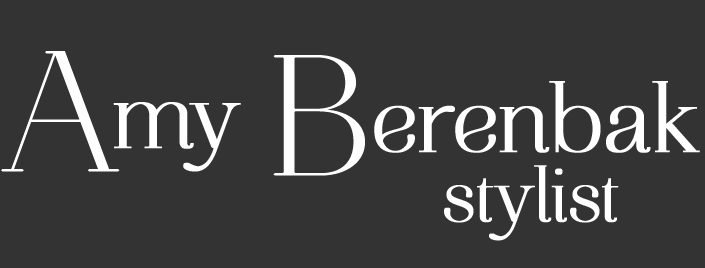
<style>
.page{position:relative;width:705px;height:268px;background:#333333}
.page>*{position:absolute;margin:0}
.t1{font:96.7px "AireBoldStd";color:#ffffff;font-weight:bold}
.t2{font:172px "AireBoldStd";color:#ffffff;font-weight:bold}
.t3{font:77.2px "AireBoldStd";color:#ffffff;font-weight:bold}
</style>
<div class="page">
<p class="t1" style="left:1px;top:51px;width:240px;height:121px"><span class="t2">A</span>my</p>
<p class="t1" style="left:273px;top:55px;width:427px;height:121px"><span class="t2">B</span>erenbak</p>
<p class="t3" style="left:444px;top:165px;width:175px;height:76px">stylist</p>
</div>
